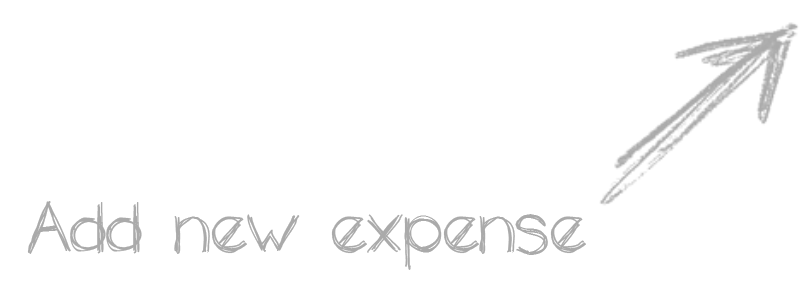
<style>
.page{position:relative;width:800px;height:300px;background:#ffffff}
.page>*{position:absolute;margin:0}
.t1{font:72px "theunseen";color:#aaaaaa}
</style>
<div class="page">
<p class="t1" style="left:27px;top:201px;width:559px;height:69px">Add new expense</p>
</div>
